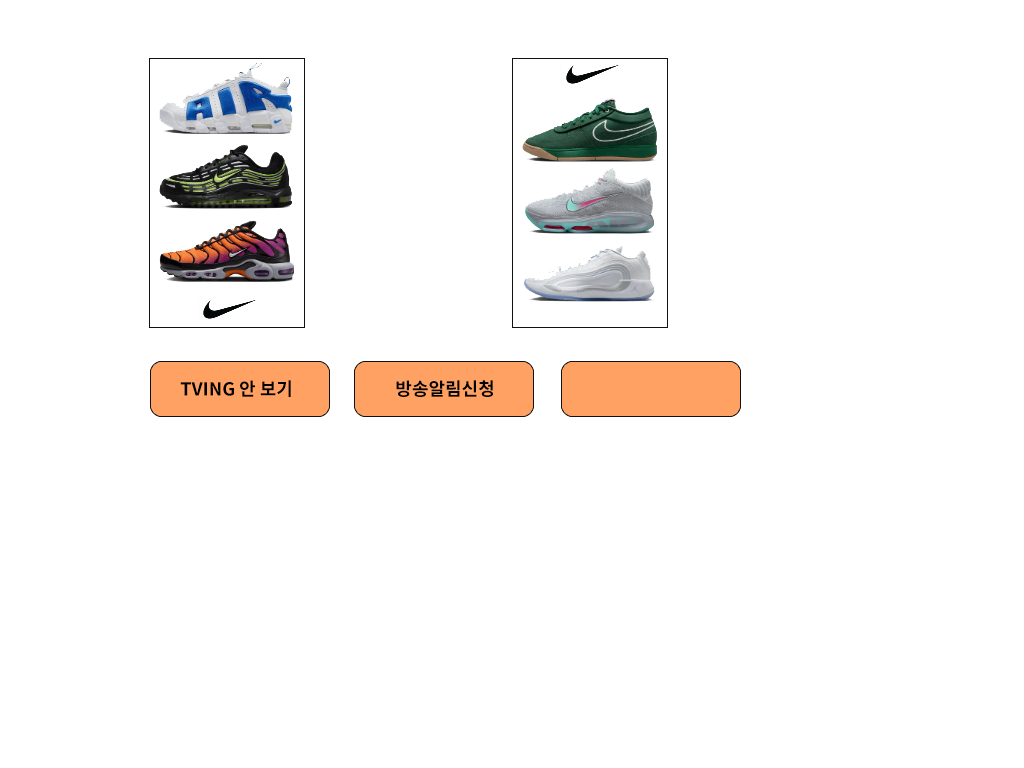
<style>
.page{position:relative;width:1024px;height:768px;background:#ffffff}
.page>*{position:absolute;margin:0}
.t1{font:18px "NotoSansKR-Bold";color:#000000}
</style>
<div class="page">
<p class="t1" style="left:180px;top:380px;width:111px;height:17px">TVING 안 보기</p>
<p class="t1" style="left:396px;top:380px;width:97px;height:17px">방송알림신청</p>
</div>
